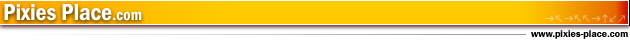
<style>
.page{position:relative;width:630px;height:49px;background:#ffffff}
.page>*{position:absolute;margin:0}
.t1{font:24px "FranklinGothic-DemiCond";color:#ffffff}
.t2{font:16px "FranklinGothic-DemiCond";color:#ffffff}
.t3{font:10px "FranklinGothic-Demi";color:#000000}
</style>
<div class="page">
<p class="t1" style="left:3px;top:3px;width:139px;height:32px">Pixies Place<span class="t2">.com</span></p>
<p class="t3" style="left:531px;top:30px;width:97px;height:9px">www.pixies-place.com</p>
</div>
